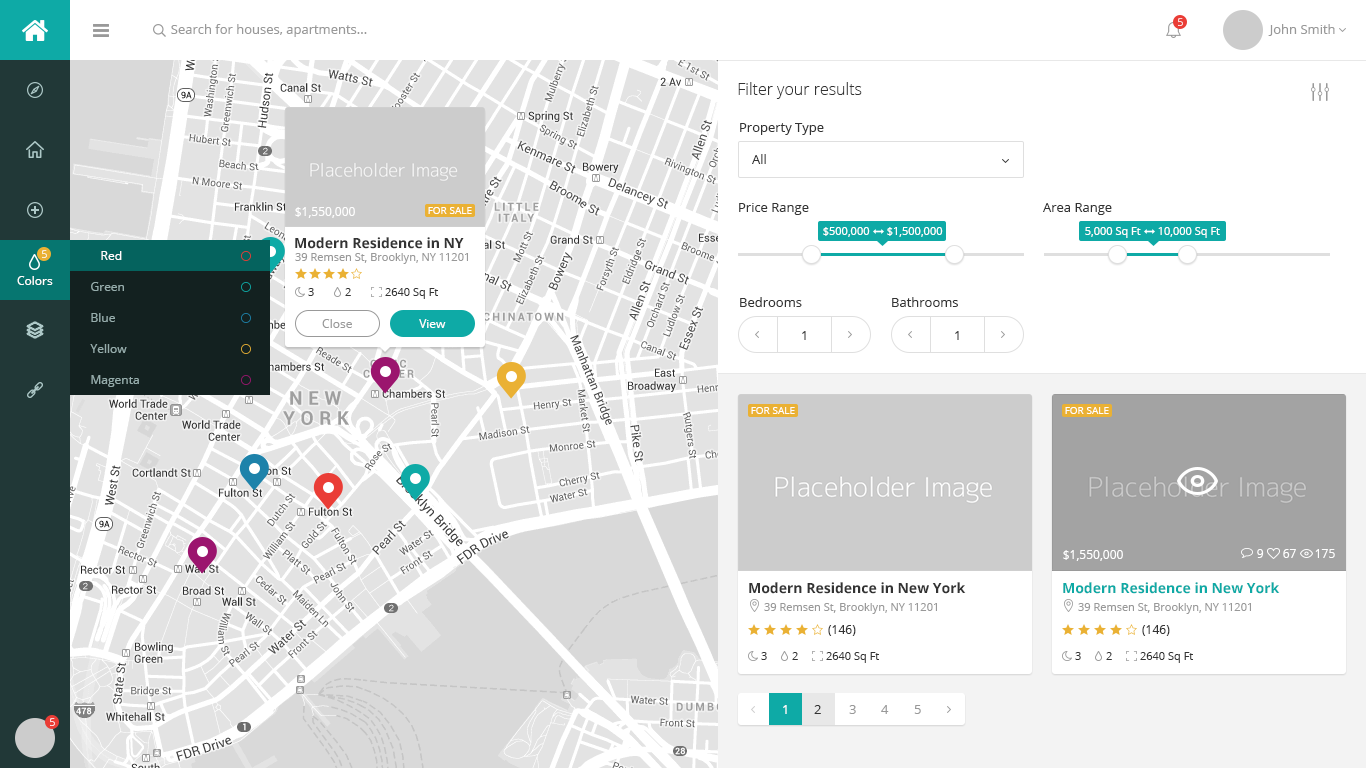
<style>
.page{position:relative;width:1366px;height:768px;background:#ffffff}
.page>*{position:absolute;margin:0}
.t1{font:13px "OpenSans";color:#999999}
.t2{font:11px "OpenSans"}
.t3{font:16px "OpenSans-Light";color:#333333}
.t4{font:13px "OpenSans";color:#333333}
.t5{font:12px "OpenSans";color:#ffffff}
.t6{font:10px "OpenSans";color:#ffffff}
.t7{font:11px "OpenSans";color:#ffffff}
.t8{font:14px "OpenSans-Bold";color:#333333}
.t9{font:11px "OpenSans";color:#999999}
.t10{font:12px "OpenSans";color:#96adac}
.t11{font:11px "OpenSans";color:#333333}
.t12{font:12px "OpenSans";color:#999999}
.t13{font:14px "OpenSans-Bold";color:#0eaaa6}
.t14{font:12px "OpenSans";color:#333333}
.t15{font:13px "OpenSans";color:#ffffff}
</style>
<div class="page">
<p class="t1" style="left:171px;top:24px;width:196px;height:13px">Search for houses, apartments...</p>
<p class="t2" style="left:1178px;top:18px;width:5px;height:8px">5</p>
<p class="t1" style="left:1268px;top:24px;width:67px;height:12px">John Smith</p>
<p class="t3" style="left:738px;top:82px;width:124px;height:17px">Filter your results</p>
<p class="t4" style="left:740px;top:123px;width:84px;height:12px">Property Type</p>
<p class="t4" style="left:752px;top:154px;width:14px;height:10px">All</p>
<p class="t5" style="left:295px;top:207px;width:60px;height:11px">$1,550,000</p>
<p class="t6" style="left:428px;top:207px;width:44px;height:7px">FOR SALE</p>
<p class="t4" style="left:739px;top:203px;width:70px;height:12px">Price Range</p>
<p class="t4" style="left:1043px;top:203px;width:69px;height:12px">Area Range</p>
<p class="t7" style="left:823px;top:227px;width:47px;height:10px">$500,000</p>
<p class="t7" style="left:887px;top:227px;width:56px;height:10px">$1,500,000</p>
<p class="t7" style="left:1085px;top:227px;width:56px;height:11px">5,000 Sq Ft</p>
<p class="t7" style="left:1158px;top:227px;width:62px;height:11px">10,000 Sq Ft</p>
<p class="t8" style="left:295px;top:237px;width:169px;height:12px">Modern Residence in NY</p>
<p class="t2" style="left:42px;top:250px;width:5px;height:8px">5</p>
<p class="t5" style="left:101px;top:251px;width:21px;height:9px">Red</p>
<p class="t9" style="left:295px;top:253px;width:173px;height:11px">39 Remsen St, Brooklyn, NY 11201</p>
<p class="t5" style="left:17px;top:276px;width:36px;height:9px">Colors</p>
<p class="t10" style="left:91px;top:282px;width:33px;height:9px">Green</p>
<p class="t11" style="left:308px;top:288px;width:6px;height:8px">3</p>
<p class="t11" style="left:345px;top:288px;width:6px;height:8px">2</p>
<p class="t11" style="left:385px;top:288px;width:53px;height:11px">2640 Sq Ft</p>
<p class="t4" style="left:740px;top:297px;width:62px;height:10px">Bedrooms</p>
<p class="t4" style="left:892px;top:297px;width:66px;height:10px">Bathrooms</p>
<p class="t10" style="left:91px;top:313px;width:24px;height:9px">Blue</p>
<p class="t12" style="left:322px;top:319px;width:30px;height:9px">Close</p>
<p class="t5" style="left:419px;top:319px;width:27px;height:9px">View</p>
<p class="t4" style="left:802px;top:331px;width:4px;height:9px">1</p>
<p class="t4" style="left:955px;top:331px;width:4px;height:9px">1</p>
<p class="t10" style="left:90px;top:344px;width:37px;height:9px">Yellow</p>
<p class="t10" style="left:91px;top:375px;width:48px;height:12px">Magenta</p>
<p class="t6" style="left:751px;top:407px;width:44px;height:7px">FOR SALE</p>
<p class="t6" style="left:1065px;top:407px;width:44px;height:7px">FOR SALE</p>
<p class="t5" style="left:1063px;top:550px;width:60px;height:11px">$1,550,000</p>
<p class="t5" style="left:1257px;top:549px;width:7px;height:9px">9</p>
<p class="t5" style="left:1283px;top:549px;width:13px;height:9px">67</p>
<p class="t5" style="left:1315px;top:549px;width:20px;height:9px">175</p>
<p class="t8" style="left:749px;top:582px;width:217px;height:12px">Modern Residence in New York</p>
<p class="t13" style="left:1063px;top:582px;width:217px;height:12px">Modern Residence in New York</p>
<p class="t9" style="left:764px;top:603px;width:173px;height:11px">39 Remsen St, Brooklyn, NY 11201</p>
<p class="t9" style="left:1078px;top:603px;width:173px;height:11px">39 Remsen St, Brooklyn, NY 11201</p>
<p class="t14" style="left:828px;top:625px;width:28px;height:11px">(146)</p>
<p class="t14" style="left:1142px;top:625px;width:28px;height:11px">(146)</p>
<p class="t11" style="left:761px;top:652px;width:6px;height:8px">3</p>
<p class="t11" style="left:792px;top:652px;width:6px;height:8px">2</p>
<p class="t11" style="left:826px;top:652px;width:53px;height:11px">2640 Sq Ft</p>
<p class="t11" style="left:1075px;top:652px;width:6px;height:8px">3</p>
<p class="t11" style="left:1106px;top:652px;width:6px;height:8px">2</p>
<p class="t11" style="left:1140px;top:652px;width:53px;height:11px">2640 Sq Ft</p>
<p class="t15" style="left:783px;top:705px;width:4px;height:9px">1</p>
<p class="t4" style="left:814px;top:705px;width:7px;height:9px">2</p>
<p class="t1" style="left:849px;top:705px;width:7px;height:9px">3</p>
<p class="t1" style="left:881px;top:705px;width:8px;height:9px">4</p>
<p class="t1" style="left:914px;top:705px;width:7px;height:9px">5</p>
<p class="t2" style="left:50px;top:718px;width:5px;height:8px">5</p>
</div>
